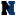
<style>
.page{position:relative;width:16px;height:16px;background:#ffffff}
.page>*{position:absolute;margin:0}
.t1{font:16.7px "Freshman"}
</style>
<div class="page">
<p class="t1" style="left:1px;top:1px;width:14px;height:14px">N</p>
</div>
